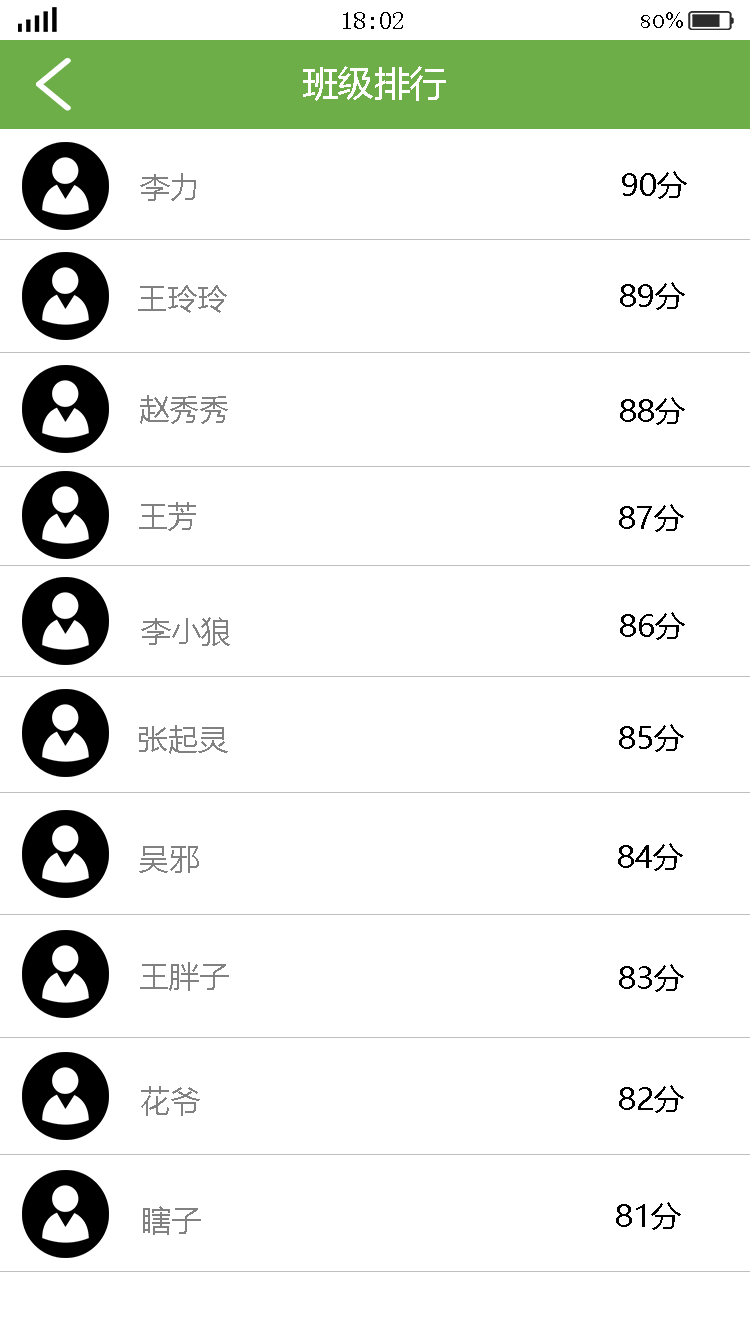
<style>
.page{position:relative;width:750px;height:1334px;background:#ffffff}
.page>*{position:absolute;margin:0}
.t1{font:25px "SimSun";color:#000000}
.t2{font:25px "BellMT";color:#000000}
.t3{font:36px "MicrosoftYaHei";color:#ffffff}
.t4{font:30px "MicrosoftYaHei";color:#818181}
.t5{font:30px "MicrosoftYaHei";color:#000000}
</style>
<div class="page">
<p class="t1" style="left:343px;top:12px;width:60px;height:17px">18:02</p>
<p class="t2" style="left:641px;top:12px;width:42px;height:16px">80%</p>
<p class="t3" style="left:303px;top:66px;width:143px;height:35px">班级排行</p>
<p class="t4" style="left:140px;top:173px;width:56px;height:28px">李力</p>
<p class="t5" style="left:622px;top:171px;width:65px;height:28px">90分</p>
<p class="t4" style="left:138px;top:285px;width:89px;height:28px">王玲玲</p>
<p class="t5" style="left:620px;top:282px;width:65px;height:28px">89分</p>
<p class="t4" style="left:140px;top:395px;width:88px;height:29px">赵秀秀</p>
<p class="t5" style="left:620px;top:397px;width:65px;height:28px">88分</p>
<p class="t4" style="left:139px;top:502px;width:57px;height:29px">王芳</p>
<p class="t5" style="left:619px;top:504px;width:65px;height:28px">87分</p>
<p class="t4" style="left:141px;top:617px;width:89px;height:29px">李小狼</p>
<p class="t5" style="left:620px;top:612px;width:65px;height:28px">86分</p>
<p class="t4" style="left:139px;top:725px;width:89px;height:29px">张起灵</p>
<p class="t5" style="left:619px;top:724px;width:65px;height:28px">85分</p>
<p class="t4" style="left:139px;top:846px;width:60px;height:27px">吴邪</p>
<p class="t5" style="left:618px;top:843px;width:65px;height:28px">84分</p>
<p class="t4" style="left:140px;top:962px;width:89px;height:29px">王胖子</p>
<p class="t5" style="left:619px;top:964px;width:65px;height:28px">83分</p>
<p class="t4" style="left:141px;top:1086px;width:59px;height:30px">花爷</p>
<p class="t5" style="left:619px;top:1085px;width:65px;height:28px">82分</p>
<p class="t4" style="left:143px;top:1206px;width:58px;height:29px">瞎子</p>
<p class="t5" style="left:616px;top:1202px;width:65px;height:28px">81分</p>
</div>
